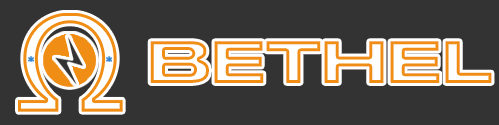
<style>
.page{position:relative;width:499px;height:125px;background:#333333}
.page>*{position:absolute;margin:0}
.t1{font:59.6px "StretchProRegular";text-transform:uppercase}
</style>
<div class="page">
<p class="t1" style="left:150px;top:41px;width:342px;height:42px">bethel</p>
</div>
